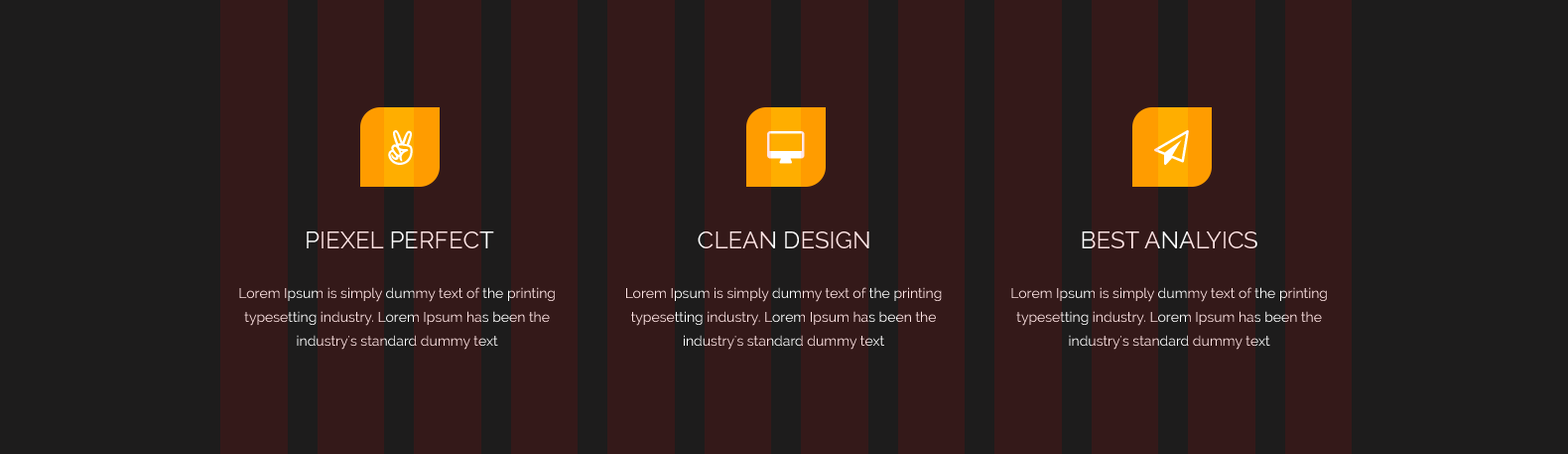
<style>
.page{position:relative;width:1568px;height:454px;background:#1d1c1c}
.page>*{position:absolute;margin:0}
.t1{font:23.8px "Raleway";color:#ffe5e5;text-transform:uppercase}
.t2{font:23.8px "Raleway";text-transform:uppercase}
.t3{font:13.9px/23.8px "Raleway"}
</style>
<div class="page">
<p class="t1" style="left:307px;top:231px;width:187px;height:17px">PIEXEL Perfect</p>
<p class="t1" style="left:698px;top:231px;width:171px;height:17px">CLEAN DESIGN</p>
<p class="t2" style="left:1082px;top:231px;width:175px;height:17px">BEST ANALYICs</p>
<p class="t3" style="left:239px;top:287px;width:316px;height:62px;text-align:center">Lorem Ipsum is simply dummy text of the printing typesetting industry. Lorem Ipsum has been the industry's standard dummy text</p>
<p class="t3" style="left:626px;top:287px;width:316px;height:62px;text-align:center">Lorem Ipsum is simply dummy text of the printing typesetting industry. Lorem Ipsum has been the industry's standard dummy text</p>
<p class="t3" style="left:1011px;top:287px;width:316px;height:62px;text-align:center">Lorem Ipsum is simply dummy text of the printing typesetting industry. Lorem Ipsum has been the industry's standard dummy text</p>
</div>
